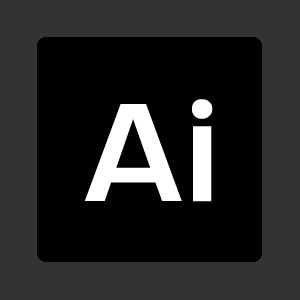
<style>
.page{position:relative;width:300px;height:300px;background:#000000}
.page>*{position:absolute;margin:0}
.t1{font:135px "BlueHighway-Regular";color:#ffffff;scale:1.25 1}
</style>
<div class="page">
<p class="t1" style="left:85px;top:99px;width:128px;height:103px">Ai</p>
</div>
